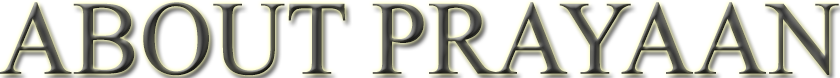
<style>
.page{position:relative;width:840px;height:78px;background:#ffffff}
.page>*{position:absolute;margin:0}
.t1{font:105.5px "TimesNewRomanPSMT";scale:0.96 1}
</style>
<div class="page">
<p class="t1" style="left:0px;top:2px;width:839px;height:74px">ABOUT PRAYAAN</p>
</div>
